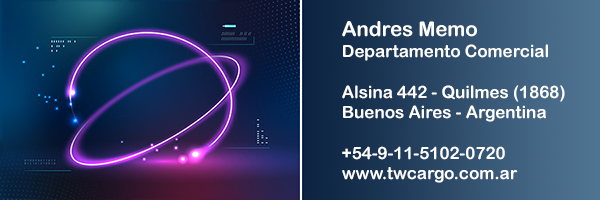
<style>
.page{position:relative;width:600px;height:200px}
.page>*{position:absolute;margin:0}
.t1{font:17px "ArialRoundedMTBold";color:#ffffff}
.t2{font:20.4px "ArialRoundedMTBold";color:#ffffff}
</style>
<div class="page">
<p class="t1" style="left:342px;top:21px;width:223px;height:162px"><span class="t2">Andres Memo<br></span>Departamento Comercial<br><br>Alsina 442 - Quilmes (1868)<br>Buenos Aires - Argentina<br><br>+54-9-11-5102-0720<br>www.twcargo.com.ar</p>
</div>
